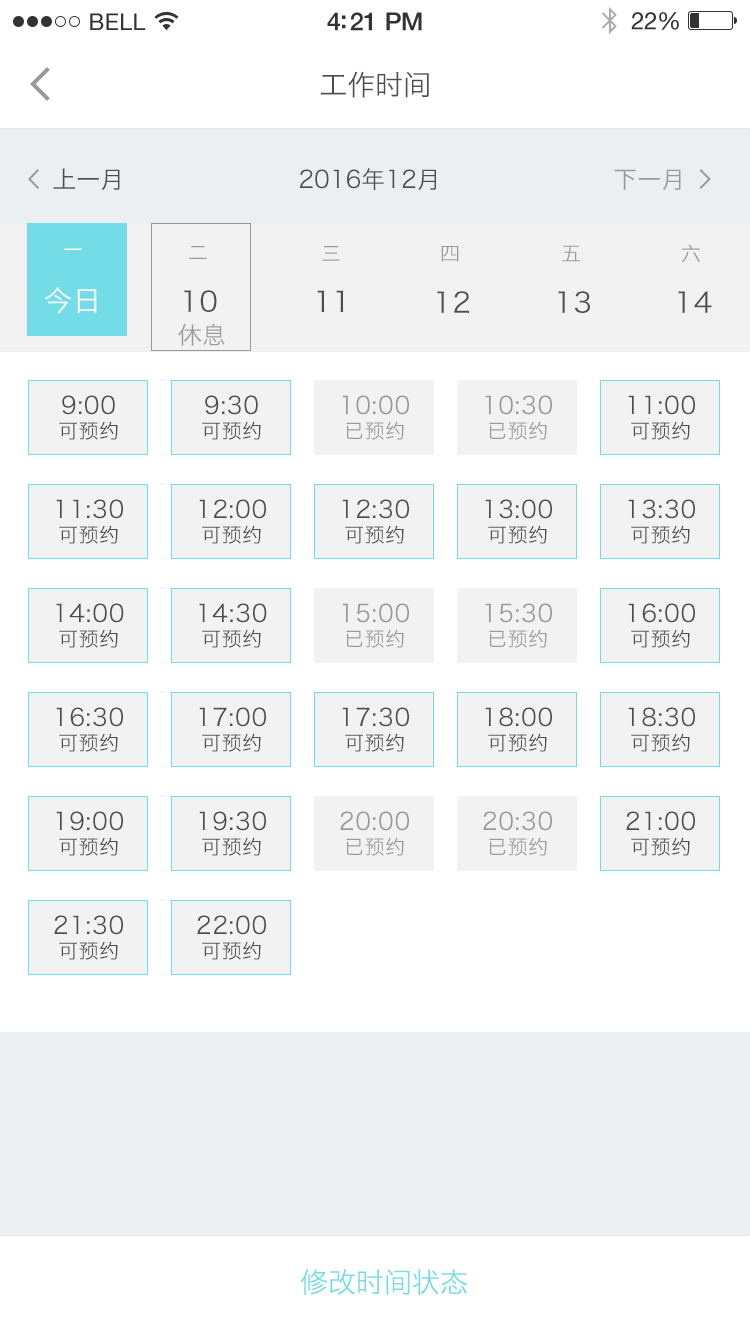
<style>
.page{position:relative;width:750px;height:1334px;background:#ffffff}
.page>*{position:absolute;margin:0}
.t1{font:28px "HiraginoSansGB-W3";color:#4d4d4d}
.t2{font:24px "HiraginoSansGB-W3";color:#4d4d4d}
.t3{font:24px "HiraginoSansGB-W3";color:#999999}
.t4{font:20px "HiraginoSansGB-W3";letter-spacing:0.03em;color:#999999}
.t5{font:20px "HiraginoSansGB-W3";letter-spacing:0.03em;color:#ffffff}
.t6{font:28px "HiraginoSansGB-W3";letter-spacing:0.03em;color:#ffffff}
.t7{font:28px "HiraginoSansGB-W3";letter-spacing:0.03em;color:#4d4d4d}
.t8{font:24px/24px "HiraginoSansGB-W3";letter-spacing:0.03em;color:#4d4d4d}
.t9{font:20px/24px "HiraginoSansGB-W3";letter-spacing:0.03em;color:#4d4d4d}
.t10{font:24px/24px "HiraginoSansGB-W3";letter-spacing:0.03em;color:#999999}
.t11{font:20px/24px "HiraginoSansGB-W3";letter-spacing:0.03em;color:#999999}
.t12{font:28px "HiraginoSansGB-W3";color:#73dce6}
</style>
<div class="page">
<p class="t1" style="left:320px;top:71px;width:109px;height:27px">工作时间</p>
<p class="t2" style="left:53px;top:168px;width:67px;height:23px">上一月</p>
<p class="t2" style="left:299px;top:168px;width:137px;height:23px">2016年12月</p>
<p class="t3" style="left:614px;top:169px;width:67px;height:22px">下一月</p>
<p class="t4" style="left:189px;top:245px;width:18px;height:15px">二</p>
<p class="t4" style="left:322px;top:245px;width:18px;height:16px">三</p>
<p class="t4" style="left:441px;top:246px;width:18px;height:16px">四</p>
<p class="t4" style="left:562px;top:245px;width:18px;height:17px">五</p>
<p class="t4" style="left:681px;top:244px;width:19px;height:19px">六</p>
<p class="t5" style="left:64px;top:248px;width:18px;height:3px">一</p>
<p class="t6" style="left:44px;top:287px;width:53px;height:27px">今日</p>
<p class="t7" style="left:184px;top:290px;width:33px;height:22px">10</p>
<p class="t7" style="left:317px;top:290px;width:27px;height:22px">11</p>
<p class="t7" style="left:437px;top:291px;width:32px;height:22px">12</p>
<p class="t7" style="left:558px;top:291px;width:32px;height:22px">13</p>
<p class="t7" style="left:678px;top:291px;width:34px;height:22px">14</p>
<p class="t3" style="left:178px;top:323px;width:47px;height:23px">休息</p>
<p class="t8" style="left:59px;top:395px;width:59px;height:45px;text-align:center">9:00<br><span class="t9">可预约</span></p>
<p class="t8" style="left:202px;top:395px;width:59px;height:45px;text-align:center">9:30<br><span class="t9">可预约</span></p>
<p class="t10" style="left:342px;top:395px;width:67px;height:45px;text-align:center">10:00<br><span class="t11">已预约</span></p>
<p class="t10" style="left:485px;top:395px;width:67px;height:45px;text-align:center">10:30<br><span class="t11">已预约</span></p>
<p class="t8" style="left:628px;top:395px;width:67px;height:45px;text-align:center">11:00<br><span class="t9">可预约</span></p>
<p class="t8" style="left:56px;top:499px;width:67px;height:45px;text-align:center">11:30<br><span class="t9">可预约</span></p>
<p class="t8" style="left:199px;top:499px;width:67px;height:45px;text-align:center">12:00<br><span class="t9">可预约</span></p>
<p class="t8" style="left:342px;top:499px;width:67px;height:45px;text-align:center">12:30<br><span class="t9">可预约</span></p>
<p class="t8" style="left:485px;top:499px;width:67px;height:45px;text-align:center">13:00<br><span class="t9">可预约</span></p>
<p class="t8" style="left:628px;top:499px;width:67px;height:45px;text-align:center">13:30<br><span class="t9">可预约</span></p>
<p class="t8" style="left:56px;top:603px;width:68px;height:45px;text-align:center">14:00<br><span class="t9">可预约</span></p>
<p class="t8" style="left:199px;top:603px;width:68px;height:45px;text-align:center">14:30<br><span class="t9">可预约</span></p>
<p class="t10" style="left:342px;top:603px;width:67px;height:45px;text-align:center">15:00<br><span class="t11">已预约</span></p>
<p class="t10" style="left:485px;top:603px;width:67px;height:45px;text-align:center">15:30<br><span class="t11">已预约</span></p>
<p class="t8" style="left:628px;top:603px;width:67px;height:45px;text-align:center">16:00<br><span class="t9">可预约</span></p>
<p class="t8" style="left:56px;top:707px;width:67px;height:45px;text-align:center">16:30<br><span class="t9">可预约</span></p>
<p class="t8" style="left:199px;top:707px;width:67px;height:45px;text-align:center">17:00<br><span class="t9">可预约</span></p>
<p class="t8" style="left:342px;top:707px;width:67px;height:45px;text-align:center">17:30<br><span class="t9">可预约</span></p>
<p class="t8" style="left:485px;top:707px;width:67px;height:45px;text-align:center">18:00<br><span class="t9">可预约</span></p>
<p class="t8" style="left:628px;top:707px;width:67px;height:45px;text-align:center">18:30<br><span class="t9">可预约</span></p>
<p class="t8" style="left:56px;top:811px;width:67px;height:45px;text-align:center">19:00<br><span class="t9">可预约</span></p>
<p class="t8" style="left:199px;top:811px;width:67px;height:45px;text-align:center">19:30<br><span class="t9">可预约</span></p>
<p class="t10" style="left:340px;top:811px;width:69px;height:45px;text-align:center">20:00<br><span class="t11">已预约</span></p>
<p class="t10" style="left:483px;top:811px;width:69px;height:45px;text-align:center">20:30<br><span class="t11">已预约</span></p>
<p class="t8" style="left:626px;top:811px;width:69px;height:45px;text-align:center">21:00<br><span class="t9">可预约</span></p>
<p class="t8" style="left:54px;top:915px;width:69px;height:45px;text-align:center">21:30<br><span class="t9">可预约</span></p>
<p class="t8" style="left:197px;top:915px;width:69px;height:45px;text-align:center">22:00<br><span class="t9">可预约</span></p>
<p class="t12" style="left:300px;top:1269px;width:167px;height:26px">修改时间状态</p>
</div>
